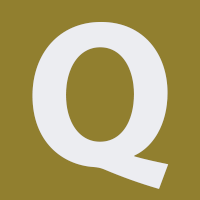
<style>
.page{position:relative;width:200px;height:200px;background:#917f2f}
.page>*{position:absolute;margin:0}
.t1{font:208.3px "MyriadPro-Bold";color:#ecedf1}
</style>
<div class="page">
<p class="t1" style="left:32px;top:21px;width:137px;height:168px">Q</p>
</div>
